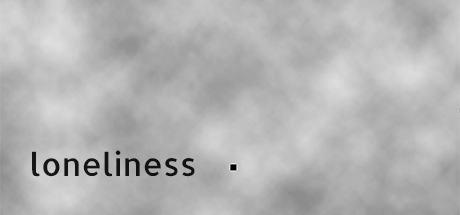
<style>
.page{position:relative;width:460px;height:215px}
.page>*{position:absolute;margin:0}
.t1{font:32px "Allerta-Regular";color:#000000}
</style>
<div class="page">
<p class="t1" style="left:32px;top:150px;width:163px;height:27px;opacity:0.95">loneliness</p>
</div>
